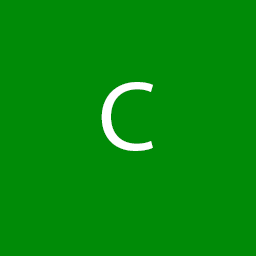
<style>
.page{position:relative;width:256px;height:256px;background:#008b07}
.page>*{position:absolute;margin:0}
.t1{font:100px "MyriadPro-Regular";color:#ffffff}
</style>
<div class="page">
<p class="t1" style="left:101px;top:82px;width:52px;height:69px">C</p>
</div>
